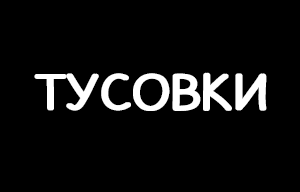
<style>
.page{position:relative;width:300px;height:192px;background:#000000}
.page>*{position:absolute;margin:0}
.t1{font:50px "HQYSaversText";letter-spacing:0.02em;color:#ffffff}
</style>
<div class="page">
<p class="t1" style="left:34px;top:72px;width:231px;height:39px">ТУСОВКИ</p>
<p class="t1" style="left:36px;top:72px;width:231px;height:39px">ТУСОВКИ</p>
</div>
